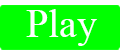
<style>
.page{position:relative;width:120px;height:50px;background:#00ff00}
.page>*{position:absolute;margin:0}
.t1{font:40px "TimesNewRomanPSMT";color:#fefefe}
</style>
<div class="page">
<p class="t1" style="left:26px;top:9px;width:71px;height:37px">Play</p>
</div>
